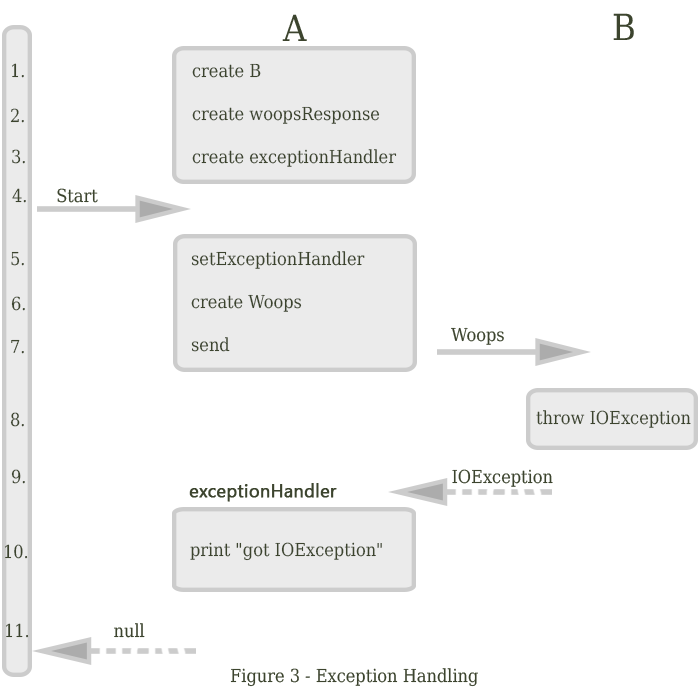
<style>
.page{position:relative;width:700px;height:700px;background:#ffffff}
.page>*{position:absolute;margin:0}
.t1{font:36px "DejaVuSerifCondensed";color:#3c442e}
.t2{font:18px "DejaVuSerifCondensed";color:#3c442e}
.t3{font:18px "SegoeUI";color:#3c442e;font-weight:bold}
</style>
<div class="page">
<p class="t1" style="left:282px;top:14px;width:25px;height:27px">A</p>
<p class="t1" style="left:613px;top:13px;width:21px;height:27px">B</p>
<p class="t2" style="left:12px;top:63px;width:12px;height:15px">1.</p>
<p class="t2" style="left:192px;top:63px;width:205px;height:104px">create B<br><br>create woopsResponse<br><br>create exceptionHandler</p>
<p class="t2" style="left:10px;top:108px;width:14px;height:15px">2.</p>
<p class="t2" style="left:12px;top:149px;width:13px;height:15px">3.</p>
<p class="t2" style="left:12px;top:188px;width:14px;height:15px">4.</p>
<p class="t2" style="left:57px;top:188px;width:41px;height:15px">Start</p>
<p class="t2" style="left:11px;top:251px;width:13px;height:15px">5.</p>
<p class="t2" style="left:191px;top:251px;width:174px;height:101px">setExceptionHandler<br><br>create Woops<br><br>send</p>
<p class="t2" style="left:11px;top:296px;width:14px;height:15px">6.</p>
<p class="t2" style="left:451px;top:327px;width:53px;height:18px">Woops</p>
<p class="t2" style="left:11px;top:339px;width:13px;height:15px">7.</p>
<p class="t2" style="left:10px;top:412px;width:14px;height:15px">8.</p>
<p class="t2" style="left:536px;top:410px;width:155px;height:18px">throw IOException</p>
<p class="t2" style="left:11px;top:469px;width:14px;height:15px">9.</p>
<p class="t2" style="left:452px;top:469px;width:101px;height:18px">IOException</p>
<p class="t3" style="left:189px;top:483px;width:148px;height:19px">exceptionHandler</p>
<p class="t2" style="left:5px;top:544px;width:23px;height:15px">10.</p>
<p class="t2" style="left:190px;top:542px;width:192px;height:19px">print "got IOException"</p>
<p class="t2" style="left:6px;top:623px;width:23px;height:15px">11.</p>
<p class="t2" style="left:114px;top:623px;width:31px;height:15px">null</p>
<p class="t2" style="left:230px;top:668px;width:248px;height:19px">Figure 3 - Exception Handling</p>
</div>
